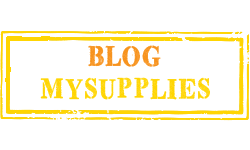
<style>
.page{position:relative;width:250px;height:150px;background:#ffffff}
.page>*{position:absolute;margin:0}
.t1{font:28.2px "TopSecretStamp";color:#ffd502}
.t2{font:28.2px "TopSecretStamp";color:#ffd72e}
.t3{font:28.2px "TopSecretStamp";color:#f7931e}
</style>
<div class="page">
<p class="t1" style="left:40px;top:45px;width:170px;height:55px"><span class="t2">  </span><span class="t3">BLOG<br></span>MYSUPPLIES</p>
</div>
